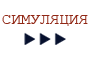
<style>
.page{position:relative;width:90px;height:62px;background:#ffffff}
.page>*{position:absolute;margin:0}
.t1{font:16px "CourierNewPSMT";color:#912816}
</style>
<div class="page">
<p class="t1" style="left:2px;top:15px;width:86px;height:11px">СИМУЛЯЦИЯ</p>
</div>
